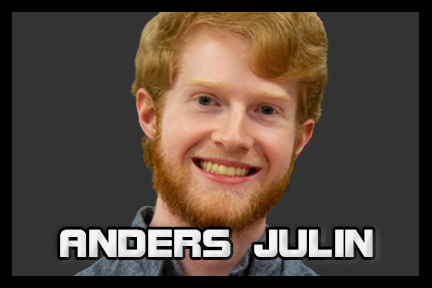
<style>
.page{position:relative;width:432px;height:288px;background:#333333}
.page>*{position:absolute;margin:0}
.t1{font:41.7px "BolsterBold";color:#f3f3f3}
</style>
<div class="page">
<p class="t1" style="left:60px;top:229px;width:313px;height:28px">ANDERS JULIN</p>
</div>
